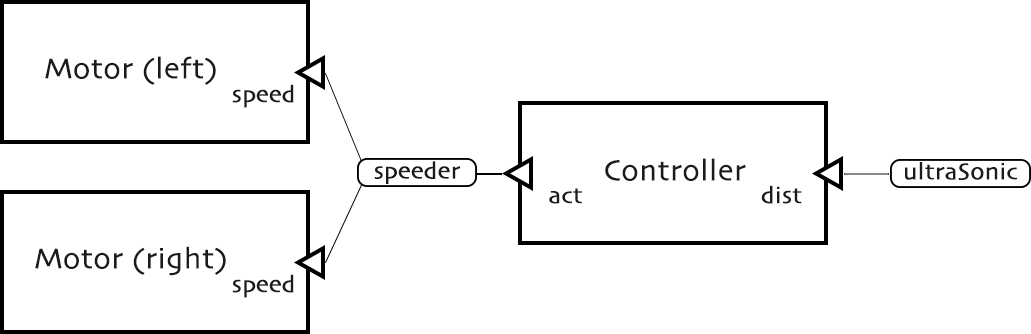
<style>
.page{position:relative;width:1031px;height:334px;background:#ffffff}
.page>*{position:absolute;margin:0}
.t1{font:30px "Skia-Regular";color:#1b1b1b;font-weight:bold}
.t2{font:24px "Skia-Regular";color:#1b1b1b;font-weight:bold}
</style>
<div class="page">
<p class="t1" style="left:45px;top:56px;width:171px;height:29px">Motor (left)</p>
<p class="t2" style="left:232px;top:84px;width:62px;height:24px">speed</p>
<p class="t2" style="left:374px;top:161px;width:87px;height:23px">speeder</p>
<p class="t1" style="left:605px;top:158px;width:141px;height:23px">Controller</p>
<p class="t2" style="left:905px;top:162px;width:112px;height:18px">ultraSonic</p>
<p class="t2" style="left:761px;top:185px;width:41px;height:19px">dist</p>
<p class="t2" style="left:549px;top:188px;width:33px;height:16px">act</p>
<p class="t1" style="left:35px;top:246px;width:191px;height:30px">Motor (right)</p>
<p class="t2" style="left:232px;top:274px;width:62px;height:24px">speed</p>
</div>
